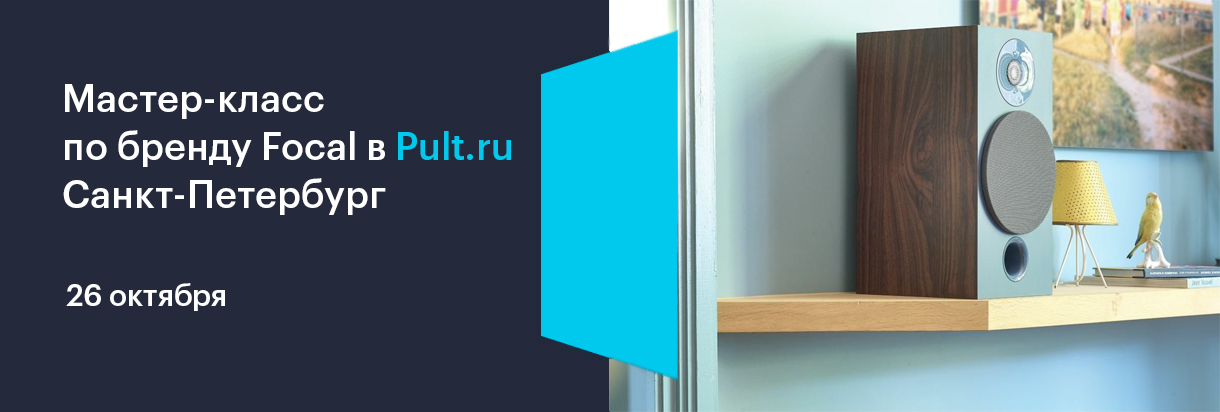
<style>
.page{position:relative;width:1220px;height:412px;background:#24293c}
.page>*{position:absolute;margin:0}
.t1{font:38px/48px "GraphikLCG-Medium";color:#ffffff}
.t2{font:38px/48px "GraphikLCG-Medium";color:#01c9ed}
.t3{font:30px "GraphikLCG-Medium";color:#ffffff}
</style>
<div class="page">
<p class="t1" style="left:63px;top:84px;width:448px;height:131px">Мастер-класс <br>по бренду Focal в <span class="t2">Pult.ru</span> Санкт-Петербург</p>
<p class="t3" style="left:66px;top:283px;width:159px;height:28px">26 октября</p>
</div>
